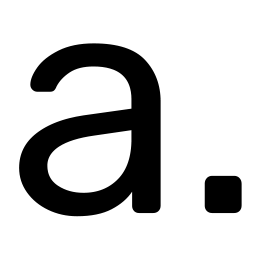
<style>
.page{position:relative;width:260px;height:260px;background:#ffffff}
.page>*{position:absolute;margin:0}
.t1{font:320px "Rubik-Regular";color:#000000}
</style>
<div class="page">
<p class="t1" style="left:19px;top:43px;width:223px;height:174px">a.</p>
</div>
